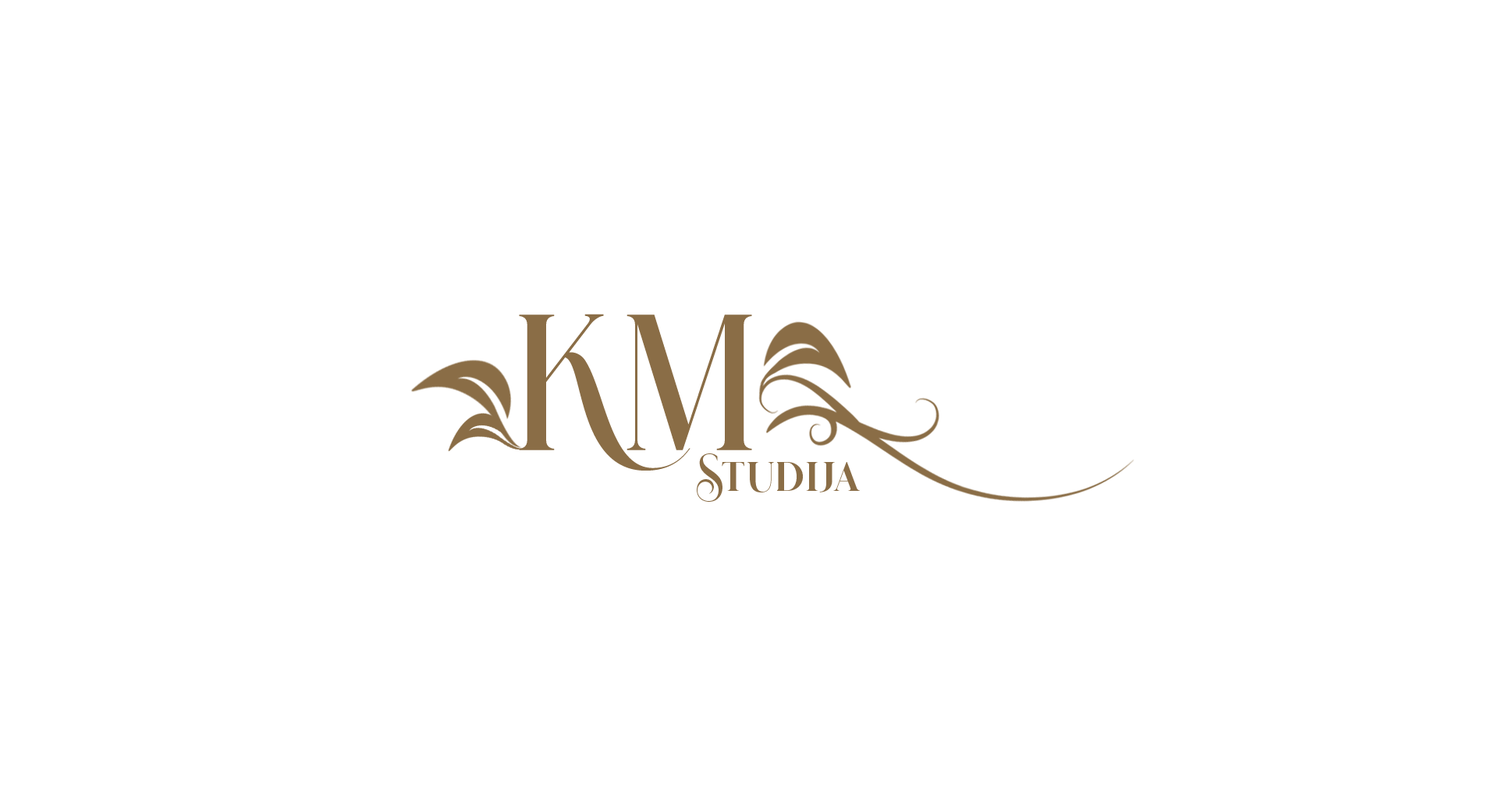
<style>
.page{position:relative;width:1498px;height:796px;background:#ffffff}
.page>*{position:absolute;margin:0}
.t1{font:130.6px "glimmeroflight-Regular";color:#8a6d46}
.t2{font:40.8px "glimmeroflight-Regular";color:#8a6d46}
</style>
<div class="page">
<p class="t1" style="left:519px;top:314px;width:233px;height:157px">KM</p>
<p class="t2" style="left:697px;top:453px;width:163px;height:49px">Studija</p>
</div>
